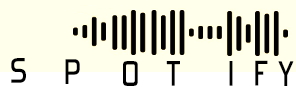
<style>
.page{position:relative;width:296px;height:87px;background:#ffffeb}
.page>*{position:absolute;margin:0}
.t1{font:41px "ForgottenFuturist";color:#000000;font-weight:bold}
</style>
<div class="page">
<p class="t1" style="left:11px;top:58px;width:15px;height:25px">S</p>
<p class="t1" style="left:65px;top:59px;width:15px;height:25px">P</p>
<p class="t1" style="left:123px;top:61px;width:15px;height:25px">O</p>
<p class="t1" style="left:166px;top:61px;width:14px;height:25px">T</p>
<p class="t1" style="left:229px;top:61px;width:4px;height:25px">I</p>
<p class="t1" style="left:255px;top:60px;width:13px;height:26px">F</p>
<p class="t1" style="left:278px;top:61px;width:16px;height:25px">Y</p>
</div>
